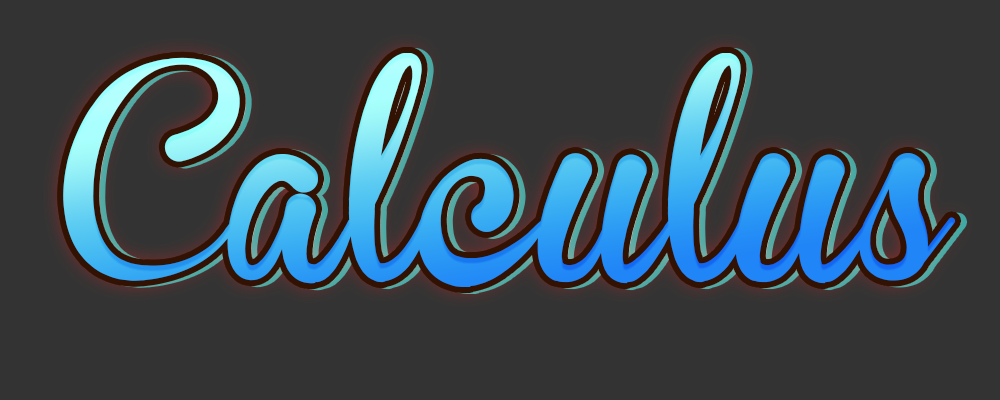
<style>
.page{position:relative;width:1000px;height:400px;background:#333333}
.page>*{position:absolute;margin:0}
.t1{font:210.9px "BrannbollFet"}
</style>
<div class="page">
<p class="t1" style="left:63px;top:53px;width:893px;height:234px">Calculus</p>
<p class="t1" style="left:63px;top:53px;width:893px;height:234px">Calculus</p>
<p class="t1" style="left:69px;top:54px;width:893px;height:234px">Calculus</p>
</div>
